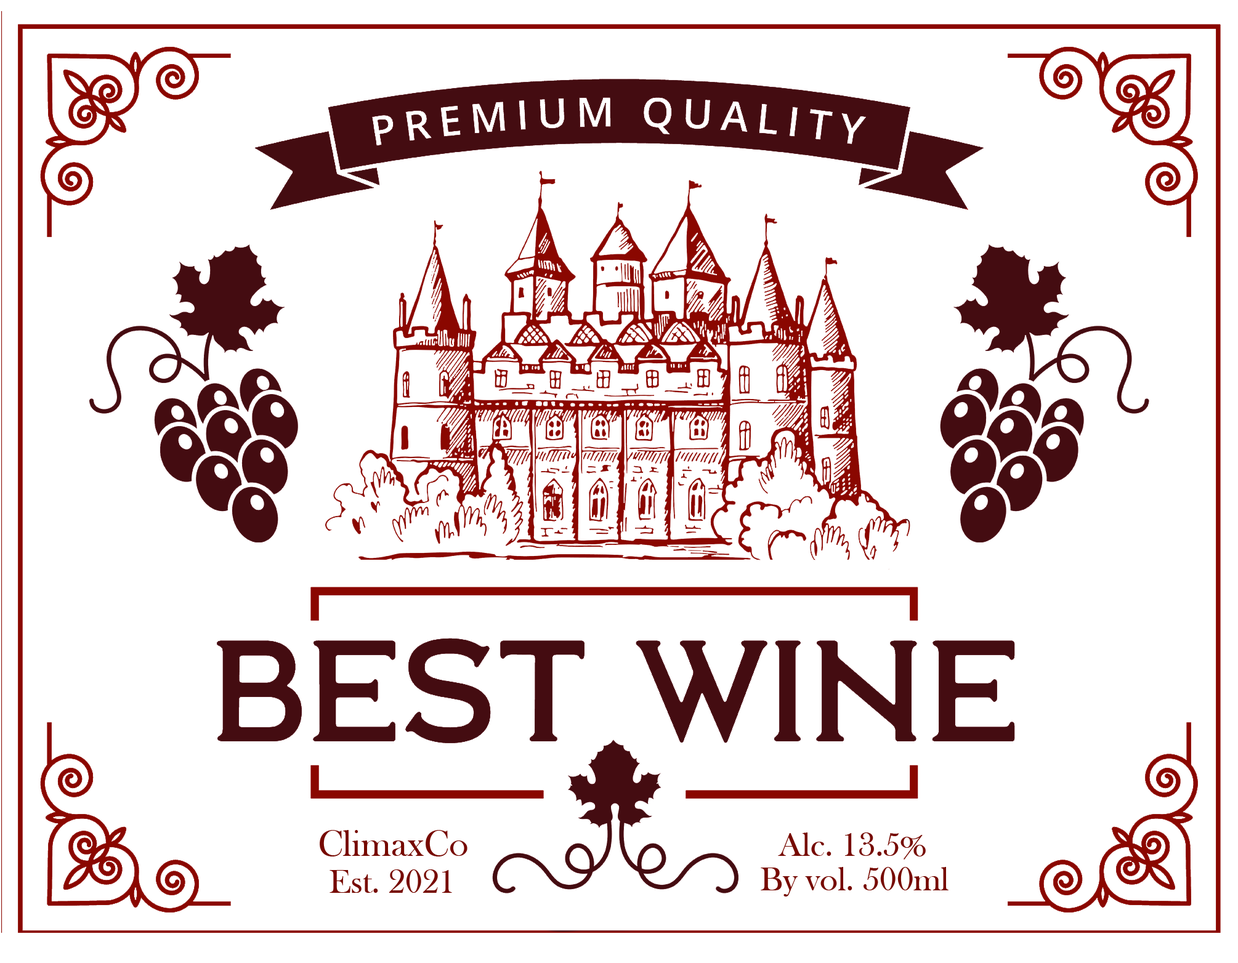
<style>
.page{position:relative;width:1238px;height:963px;background:#ffffff}
.page>*{position:absolute;margin:0}
.t1{font:37.6px "BaskOldFace";color:#760900}
.t2{font:34.2px "BaskOldFace";color:#760900}
</style>
<div class="page">
<p class="t1" style="left:320px;top:830px;width:147px;height:27px">ClimaxCo</p>
<p class="t2" style="left:778px;top:833px;width:148px;height:27px">Alc. 13.5%</p>
<p class="t2" style="left:329px;top:870px;width:123px;height:23px">Est. 2021</p>
<p class="t2" style="left:761px;top:867px;width:187px;height:30px">By vol. 500ml</p>
</div>
